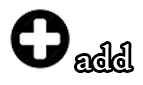
<style>
.page{position:relative;width:143px;height:85px;background:#ffffff}
.page>*{position:absolute;margin:0}
.t1{font:38px "HighTowerText-Reg";color:#ffffff}
</style>
<div class="page">
<p class="t1" style="left:77px;top:44px;width:55px;height:26px">add</p>
</div>
